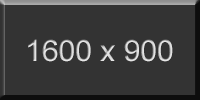
<style>
.page{position:relative;width:200px;height:100px;background:#333333}
.page>*{position:absolute;margin:0}
.t1{font:30px "ArialMT";color:#dddddd}
</style>
<div class="page">
<p class="t1" style="left:28px;top:39px;width:145px;height:23px">1600 x 900</p>
</div>
